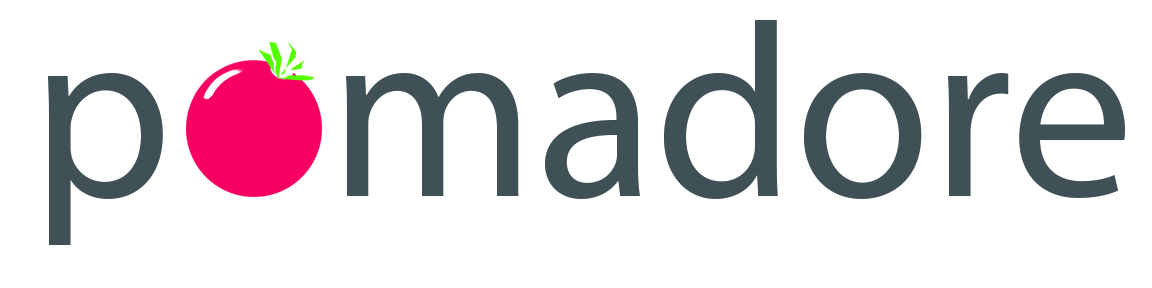
<style>
.page{position:relative;width:1152px;height:288px;background:#ffffff}
.page>*{position:absolute;margin:0}
.t1{font:247.9px "MyriadPro-Regular";color:#3f5156}
</style>
<div class="page">
<p class="t1" style="left:48px;top:20px;width:1077px;height:225px">p   madore</p>
</div>
